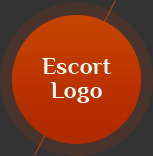
<style>
.page{position:relative;width:153px;height:156px;background:#333333}
.page>*{position:absolute;margin:0}
.t1{font:24px/24px "Philosopher-Bold";color:#ffffff}
</style>
<div class="page">
<p class="t1" style="left:42px;top:58px;width:70px;height:45px;text-align:center">Escort<br>Logo</p>
</div>
